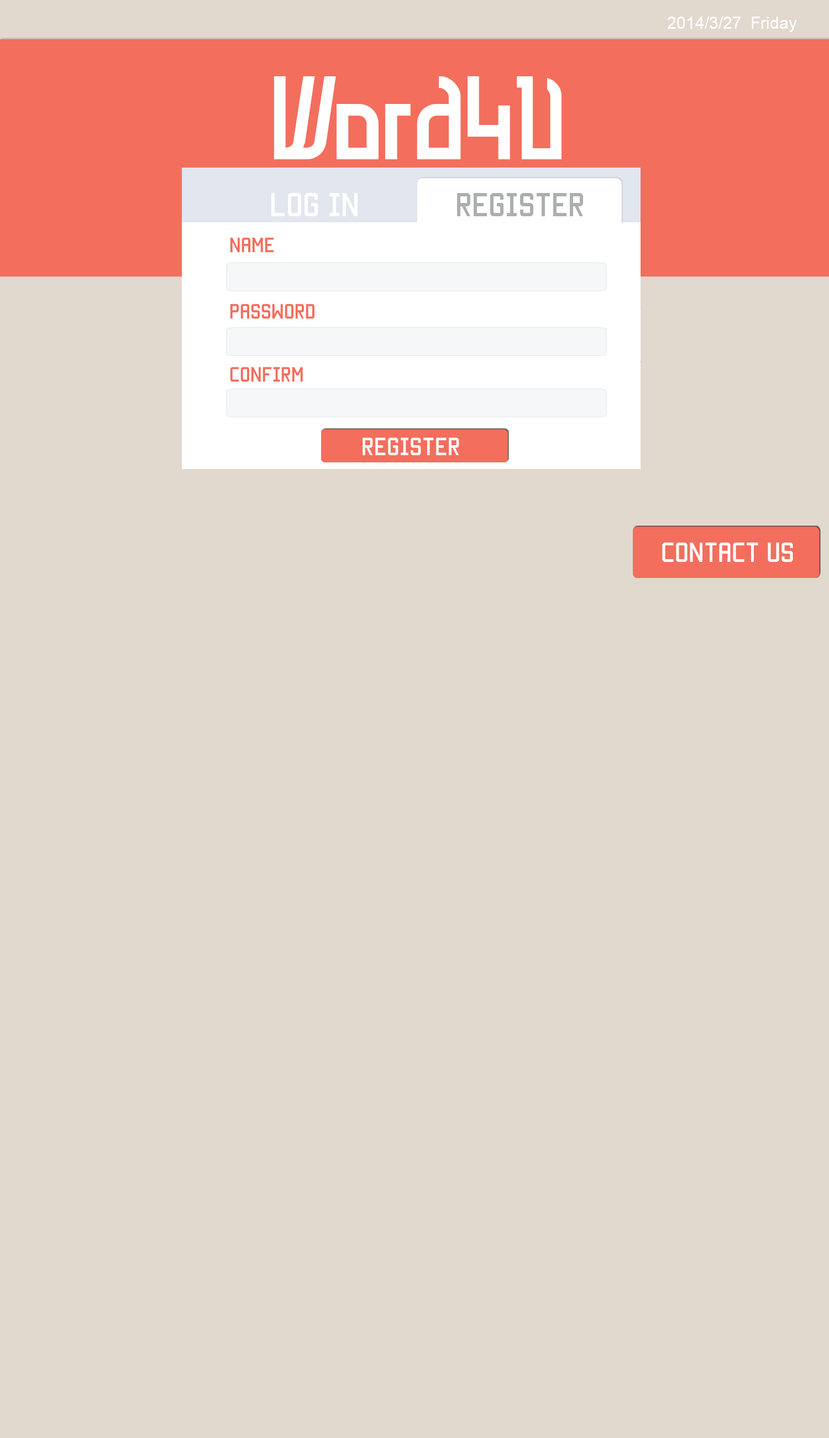
<style>
.page{position:relative;width:829px;height:1438px;background:#e1d9ce}
.page>*{position:absolute;margin:0}
.t1{font:16.6px "ArialMT";color:#ffffff}
.t2{font:110.6px "QuatSteel-DemiBold";color:#ffffff}
.t3{font:26.5px "Manteka";color:#ffffff}
.t4{font:26.5px "Manteka";color:#adaeae}
.t5{font:16.6px "Manteka";color:#f36e5d}
.t6{font:19.9px "Manteka";color:#ffffff}
.t7{font:22.1px "Manteka";color:#ffffff}
</style>
<div class="page">
<p class="t1" style="left:667px;top:17px;width:130px;height:15px">2014/3/27  Friday</p>
<p class="t2" style="left:274px;top:76px;width:288px;height:83px">Word4U</p>
<p class="t3" style="left:271px;top:193px;width:87px;height:23px">log in</p>
<p class="t4" style="left:457px;top:193px;width:126px;height:23px">Register</p>
<p class="t5" style="left:230px;top:237px;width:44px;height:15px">name</p>
<p class="t5" style="left:230px;top:304px;width:85px;height:14px">PASSWORD</p>
<p class="t5" style="left:230px;top:367px;width:73px;height:15px">Confirm</p>
<p class="t6" style="left:363px;top:437px;width:97px;height:18px">Register</p>
<p class="t7" style="left:662px;top:542px;width:131px;height:20px">Contact us</p>
</div>
